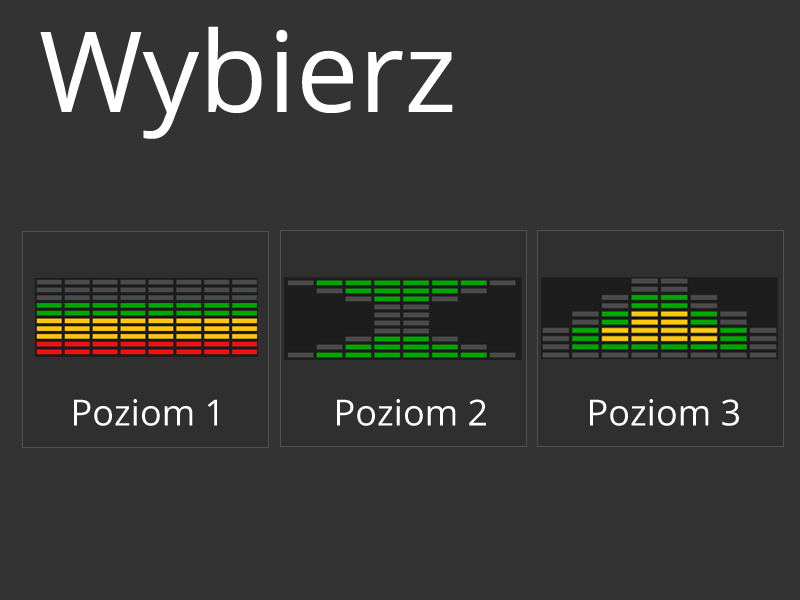
<style>
.page{position:relative;width:800px;height:600px;background:#333333}
.page>*{position:absolute;margin:0}
.t1{font:111.8px "OpenSans";color:#ffffff}
.t2{font:36px "OpenSans";color:#ffffff}
</style>
<div class="page">
<p class="t1" style="left:40px;top:26px;width:413px;height:113px">Wybierz</p>
<p class="t2" style="left:74px;top:399px;width:143px;height:27px">Poziom 1</p>
<p class="t2" style="left:337px;top:399px;width:149px;height:27px">Poziom 2</p>
<p class="t2" style="left:590px;top:399px;width:149px;height:27px">Poziom 3</p>
</div>
